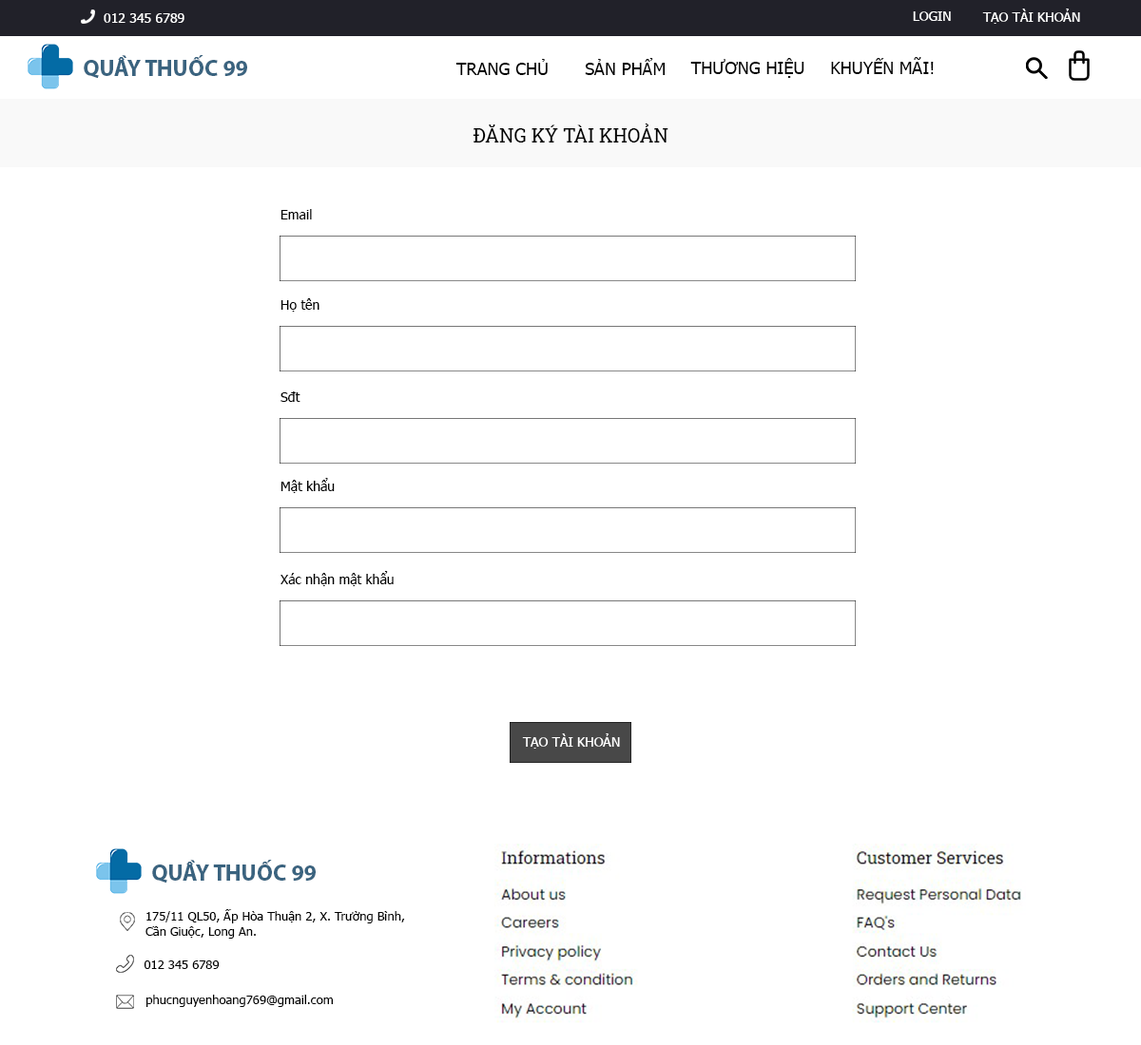
<style>
.page{position:relative;width:1141px;height:1045px;background:#ffffff}
.page>*{position:absolute;margin:0}
.t1{font:13.3px "Tahoma";color:#ffffff}
.t2{font:22.8px "MyriadPro-Bold";color:#3a637f}
.t3{font:17.1px "Tahoma";color:#000000}
.t4{font:19px "RobotoSlab-Regular";color:#000000}
.t5{font:13.3px "Tahoma";color:#000000}
.t6{font:12.4px "Tahoma";color:#000000}
</style>
<div class="page">
<p class="t1" style="left:104px;top:13px;width:80px;height:10px">012 345 6789</p>
<p class="t1" style="left:912px;top:11px;width:38px;height:10px">LOGIN</p>
<p class="t1" style="left:982px;top:9px;width:98px;height:15px">TẠO TÀI KHOẢN</p>
<p class="t2" style="left:84px;top:55px;width:163px;height:24px">QUẦY THUỐC 99</p>
<p class="t3" style="left:455px;top:59px;width:92px;height:16px">TRANG CHỦ</p>
<p class="t3" style="left:585px;top:58px;width:80px;height:17px">SẢN PHẨM</p>
<p class="t3" style="left:690px;top:58px;width:114px;height:20px">THƯƠNG HIỆU</p>
<p class="t3" style="left:831px;top:57px;width:102px;height:17px">KHUYẾN MÃI!</p>
<p class="t4" style="left:472px;top:124px;width:196px;height:19px">ĐĂNG KÝ TÀI KHOẢN</p>
<p class="t5" style="left:280px;top:209px;width:32px;height:11px">Email</p>
<p class="t5" style="left:280px;top:298px;width:39px;height:14px">Họ tên</p>
<p class="t5" style="left:280px;top:392px;width:20px;height:10px">Sđt</p>
<p class="t5" style="left:280px;top:478px;width:55px;height:15px">Mật khẩu</p>
<p class="t5" style="left:280px;top:571px;width:113px;height:15px">Xác nhận mật khẩu</p>
<p class="t1" style="left:522px;top:734px;width:98px;height:15px">TẠO TÀI KHOẢN</p>
<p class="t2" style="left:152px;top:860px;width:164px;height:24px">QUẦY THUỐC 99</p>
<p class="t6" style="left:145px;top:910px;width:260px;height:29px">175/11 QL50, Ấp Hòa Thuận 2, X. Trường Bình, <br>Cần Giuộc, Long An.</p>
<p class="t6" style="left:144px;top:961px;width:76px;height:8px">012 345 6789</p>
<p class="t6" style="left:146px;top:995px;width:187px;height:12px">phucnguyenhoang769@gmail.com</p>
</div>
